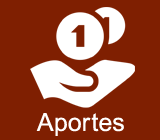
<style>
.page{position:relative;width:160px;height:140px;background:#7f1f01}
.page>*{position:absolute;margin:0}
.t1{font:25px "ArialMT";color:#ffffff}
</style>
<div class="page">
<p class="t1" style="left:36px;top:113px;width:88px;height:23px">Aportes</p>
</div>
